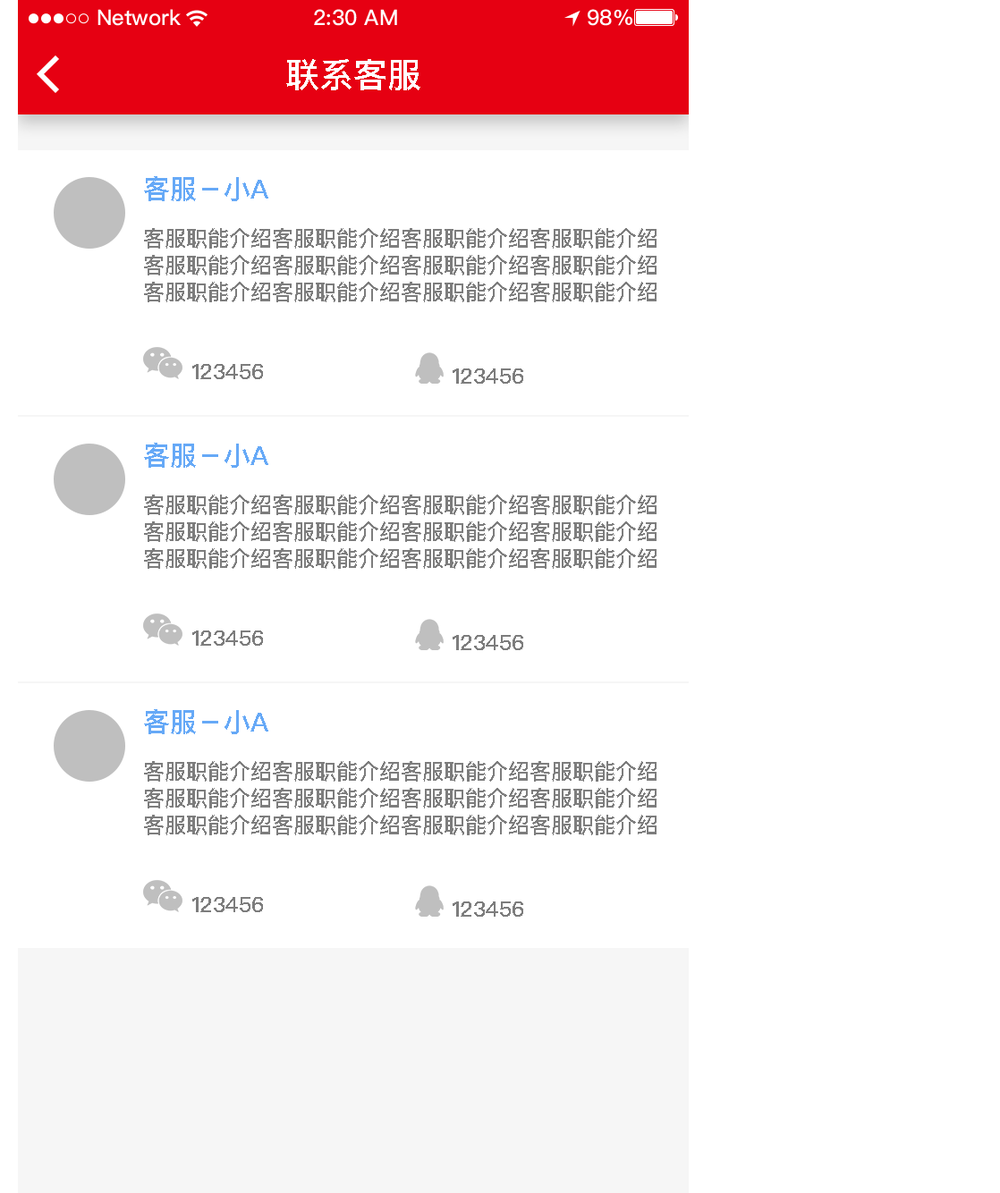
<style>
.page{position:relative;width:1000px;height:1193px;background:#ffffff}
.page>*{position:absolute;margin:0}
.t1{font:34px "PingFangSC-Medium";color:#ffffff;text-transform:uppercase}
.t2{font:26.8px "PingFangSC-Medium";color:#66a9f7;text-transform:uppercase}
.t3{font:21.5px/26.8px "PingFangSC-Medium";color:#7d7d7d;text-transform:uppercase}
.t4{font:21.5px "PingFangSC-Medium";color:#7d7d7d;text-transform:uppercase}
</style>
<div class="page">
<p class="t1" style="left:286px;top:59px;width:134px;height:31px">联系客服</p>
<p class="t2" style="left:144px;top:176px;width:124px;height:25px">客服－小a</p>
<p class="t3" style="left:144px;top:228px;width:512px;height:74px;text-align:center">客服职能介绍客服职能介绍客服职能介绍客服职能介绍<br>客服职能介绍客服职能介绍客服职能介绍客服职能介绍<br>客服职能介绍客服职能介绍客服职能介绍客服职能介绍</p>
<p class="t4" style="left:192px;top:364px;width:71px;height:15px">123456</p>
<p class="t4" style="left:452px;top:368px;width:71px;height:16px">123456</p>
<p class="t2" style="left:144px;top:443px;width:124px;height:25px">客服－小a</p>
<p class="t3" style="left:144px;top:494px;width:512px;height:75px;text-align:center">客服职能介绍客服职能介绍客服职能介绍客服职能介绍<br>客服职能介绍客服职能介绍客服职能介绍客服职能介绍<br>客服职能介绍客服职能介绍客服职能介绍客服职能介绍</p>
<p class="t4" style="left:192px;top:630px;width:71px;height:16px">123456</p>
<p class="t4" style="left:452px;top:635px;width:71px;height:15px">123456</p>
<p class="t2" style="left:144px;top:709px;width:124px;height:25px">客服－小a</p>
<p class="t3" style="left:144px;top:761px;width:512px;height:74px;text-align:center">客服职能介绍客服职能介绍客服职能介绍客服职能介绍<br>客服职能介绍客服职能介绍客服职能介绍客服职能介绍<br>客服职能介绍客服职能介绍客服职能介绍客服职能介绍</p>
<p class="t4" style="left:192px;top:897px;width:71px;height:15px">123456</p>
<p class="t4" style="left:452px;top:901px;width:71px;height:16px">123456</p>
</div>
